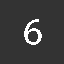
<style>
.page{position:relative;width:64px;height:64px;background:#333333}
.page>*{position:absolute;margin:0}
.t1{font:40px "MyriadPro-Regular";color:#ffffff}
</style>
<div class="page">
<p class="t1" style="left:24px;top:19px;width:18px;height:26px">6</p>
</div>
